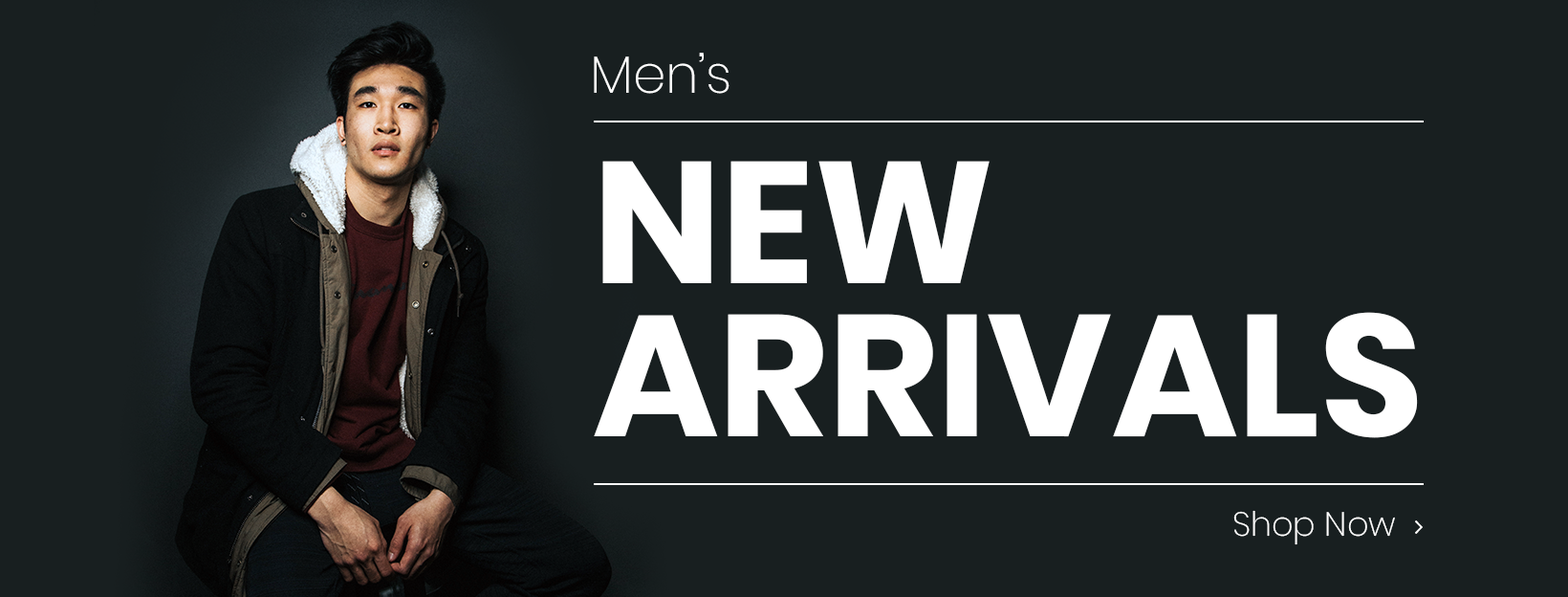
<style>
.page{position:relative;width:1568px;height:597px;background:#181f20}
.page>*{position:absolute;margin:0}
.t1{font:52.6px "Poppins-ExtraLight";color:#ffffff}
.t2{font:172.1px/153px "Poppins-Bold";color:#ffffff}
.t3{font:33.5px "Poppins-ExtraLight";color:#ffffff}
</style>
<div class="page">
<p class="t1" style="left:594px;top:53px;width:136px;height:41px">Men’s</p>
<p class="t2" style="left:594px;top:161px;width:824px;height:277px">NEW<br>ARRIVALS</p>
<p class="t3" style="left:1233px;top:510px;width:162px;height:35px">Shop Now</p>
</div>
